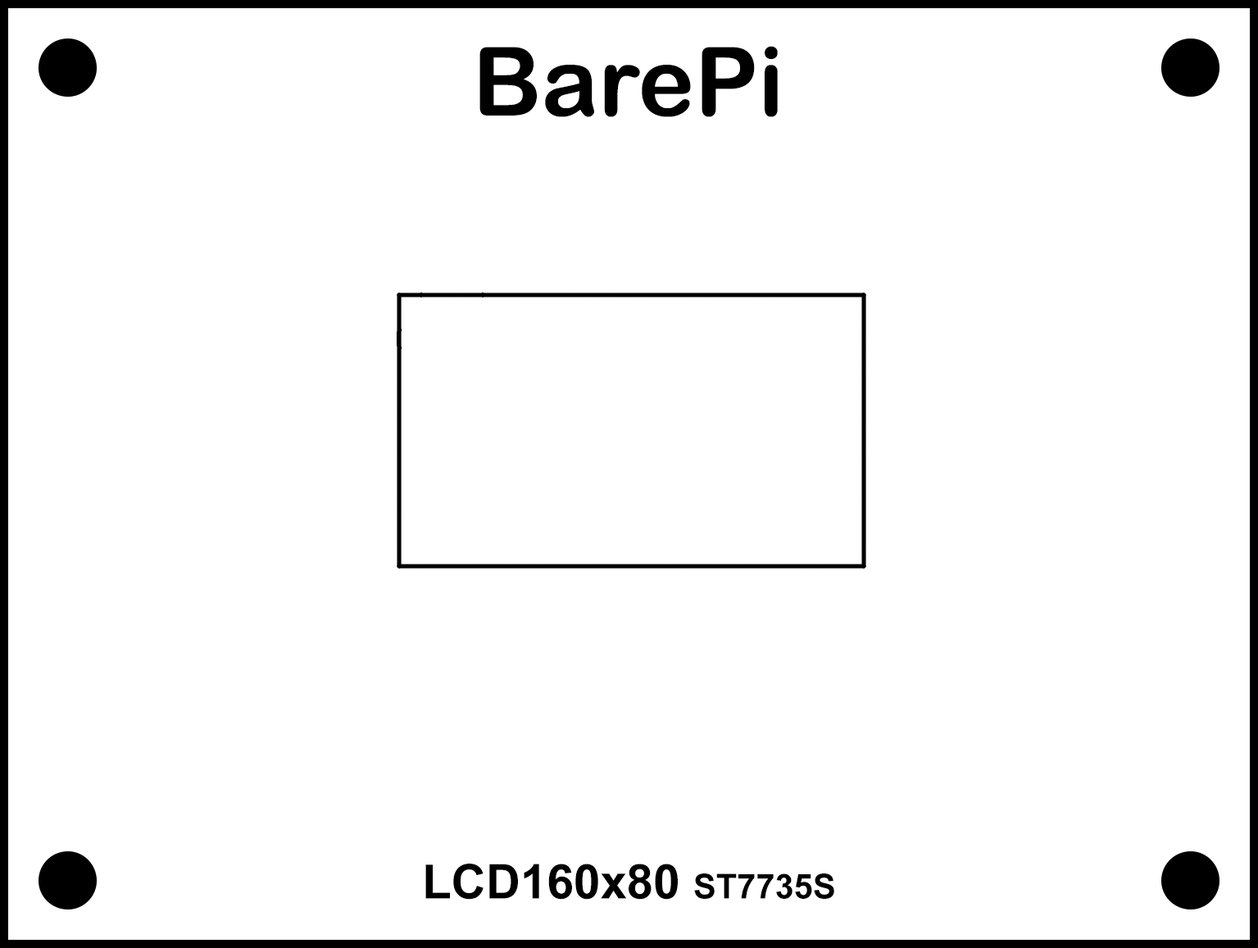
<style>
.page{position:relative;width:1258px;height:948px;background:#ffffff}
.page>*{position:absolute;margin:0}
.t1{font:95.6px "ArialRoundedMTBold";color:#000000}
.t2{font:47.8px "Arial-BoldMT";color:#000000}
.t3{font:34.1px "Arial-BoldMT";color:#000000}
</style>
<div class="page">
<p class="t1" style="left:479px;top:46px;width:299px;height:71px">BarePi</p>
<p class="t2" style="left:425px;top:864px;width:409px;height:36px">LCD160x80 <span class="t3">ST7735S</span></p>
</div>
